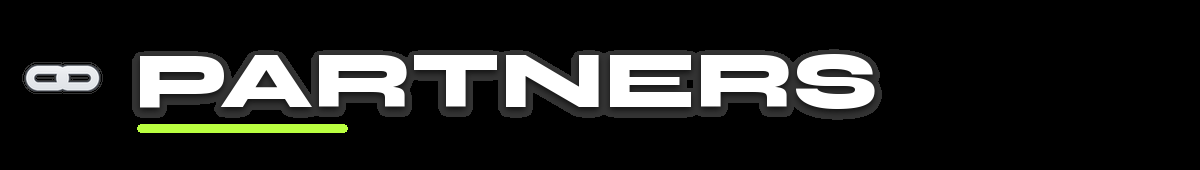
<style>
.page{position:relative;width:1200px;height:170px;background:#000000}
.page>*{position:absolute;margin:0}
.t1{font:80px "Syne-ExtraBold";color:#ffffff}
</style>
<div class="page">
<p class="t1" style="left:140px;top:54px;width:735px;height:55px">PARTNERS</p>
</div>
